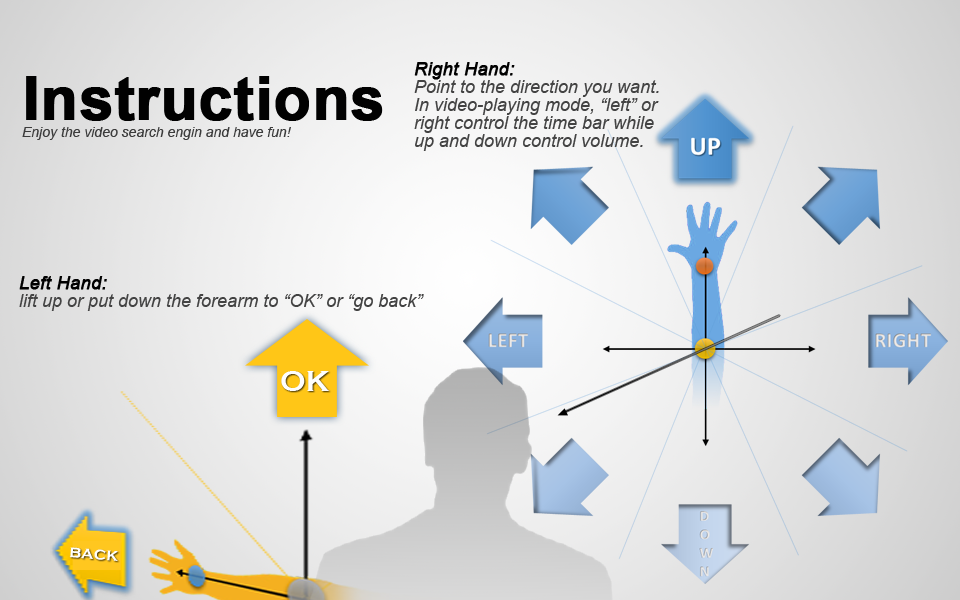
<style>
.page{position:relative;width:960px;height:600px}
.page>*{position:absolute;margin:0}
.t1{font:18px/18px "Arial-ItalicMT";color:#434343}
.t2{font:18px/18px "Arial-ItalicMT";color:#010101;font-weight:bold}
.t3{font:14px/18px "Arial-ItalicMT";color:#3c3c3c}
.t4{font:60px/18px "Arial-BoldMT";color:#010101;font-weight:bold}
.t5{font:18px/18px "Arial-ItalicMT";color:#000000;font-weight:bold}
.t6{font:30px "CopperplateGothic-Bold";color:#fefefe}
.t7{font:18px "CopperplateGothic-Bold";color:#fefefe}
</style>
<div class="page">
<p class="t1" style="left:414px;top:62px;width:245px;height:89px"><span class="t2">Right Hand: <br></span>Point to the direction you want. <br>In video-playing mode, “left” or <br>right control the time bar while <br>up and down control volume.</p>
<p class="t3" style="left:22px;top:76px;width:361px;height:64px"><span class="t4">Instructions<br></span>Enjoy the video search engin and have fun!</p>
<p class="t1" style="left:19px;top:276px;width:405px;height:35px"><span class="t5">Left Hand: <br></span>lift up or put down the forearm to “OK” or “go back”</p>
<p class="t6" style="left:281px;top:371px;width:49px;height:20px">OK</p>
<p class="t7" style="left:69px;top:547px;width:50px;height:14px;rotate:5deg">back</p>
</div>
